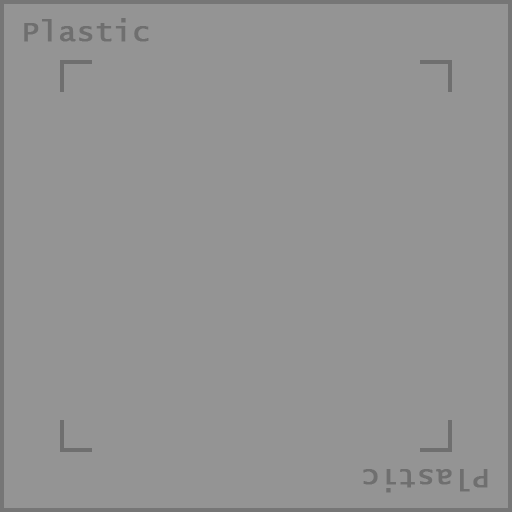
<style>
.page{position:relative;width:512px;height:512px;background:#949494}
.page>*{position:absolute;margin:0}
.t1{font:29.3px "LucidaConsole";color:#6f6f6f;font-weight:bold}
</style>
<div class="page">
<p class="t1" style="left:24px;top:18px;width:125px;height:24px">Plastic</p>
<p class="t1" style="left:363px;top:469px;width:125px;height:24px;rotate:180deg">Plastic</p>
</div>
